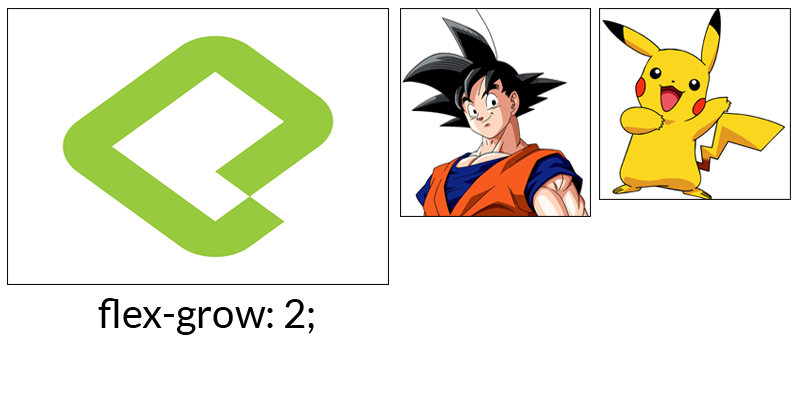
<style>
.page{position:relative;width:800px;height:400px;background:#ffffff}
.page>*{position:absolute;margin:0}
.t1{font:40px "Lato-Regular";color:#000000}
</style>
<div class="page">
<p class="t1" style="left:98px;top:298px;width:216px;height:37px">flex-grow: 2;</p>
</div>
